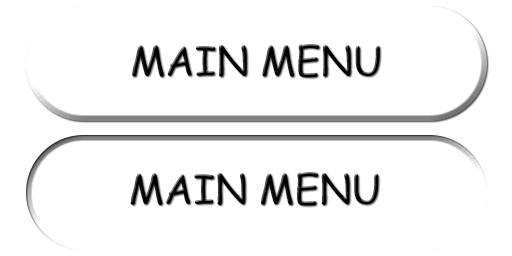
<style>
.page{position:relative;width:512px;height:256px;background:#ffffff}
.page>*{position:absolute;margin:0}
.t1{font:40px "ComicSansMS";color:#000000}
.t2{font:40.3px "ComicSansMS";color:#000000}
</style>
<div class="page">
<p class="t1" style="left:132px;top:44px;width:248px;height:34px">MAIN MENU</p>
<p class="t2" style="left:130px;top:172px;width:249px;height:34px">MAIN MENU</p>
</div>
